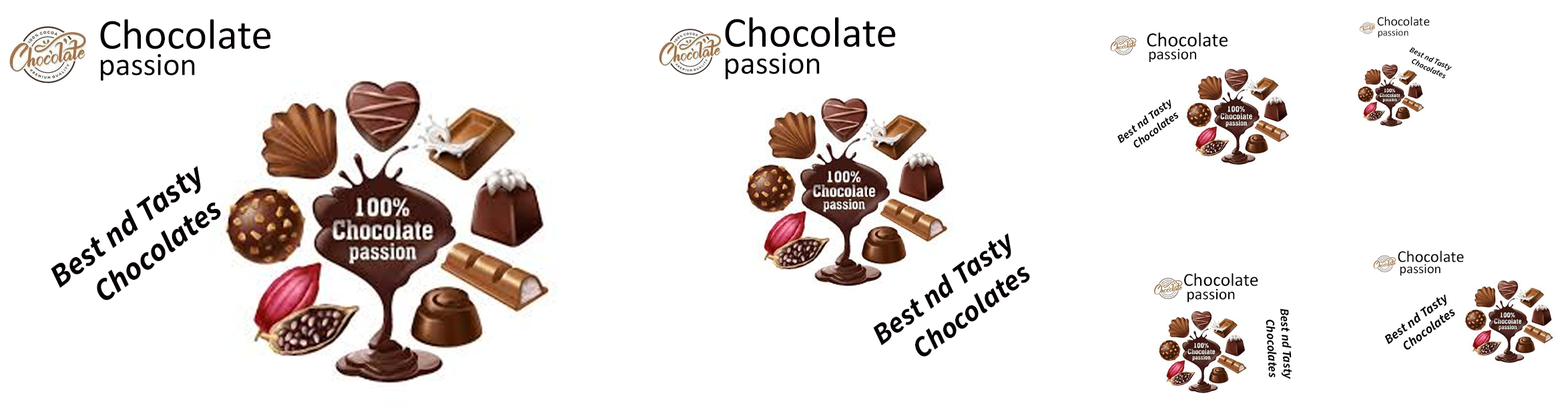
<style>
.page{position:relative;width:1568px;height:420px;background:#ffffff}
.page>*{position:absolute;margin:0}
.t1{font:43px "Calibri";color:#070101}
.t2{font:13px "Calibri";color:#070101}
.t3{font:10.2px "Calibri";color:#070101}
.t4{font:20.3px "Calibri";color:#070101}
.t5{font:32px "Calibri";color:#070101}
.t6{font:16px "Calibri";color:#070101}
.t7{font:7.9px "SourceSansItalic-BoldItalic";color:#070101}
.t8{font:11.5px "SourceSansItalic-BoldItalic";color:#070101}
.t9{font:32px "SourceSansItalic-BoldItalic";color:#070101}
.t10{font:29.5px "SourceSansItalic-BoldItalic";color:#070101}
.t11{font:16.6px "Calibri";color:#070101}
.t12{font:13.7px "Calibri";color:#070101}
.t13{font:18.6px "Calibri";color:#070101}
.t14{font:13.2px "SourceSansItalic-BoldItalic";color:#070101}
.t15{font:12.4px "SourceSansItalic-BoldItalic";color:#070101}
</style>
<div class="page">
<p class="t1" style="left:725px;top:17px;width:171px;height:30px">Chocolate</p>
<p class="t2" style="left:1377px;top:17px;width:53px;height:9px">Chocolate</p>
<p class="t1" style="left:100px;top:19px;width:171px;height:30px">Chocolate</p>
<p class="t3" style="left:1378px;top:29px;width:30px;height:9px">passion</p>
<p class="t4" style="left:1147px;top:32px;width:81px;height:15px">Chocolate</p>
<p class="t5" style="left:726px;top:53px;width:94px;height:26px">passion</p>
<p class="t6" style="left:1149px;top:49px;width:47px;height:13px">passion</p>
<p class="t7" style="left:1409px;top:47px;width:43px;height:32px;rotate:25deg">Best nd Tasty<br>    Chocolates</p>
<p class="t5" style="left:101px;top:54px;width:94px;height:27px">passion</p>
<p class="t8" style="left:1117px;top:99px;width:62px;height:49px;rotate:-37deg">Best nd Tasty<br>    Chocolates</p>
<p class="t9" style="left:51px;top:166px;width:170px;height:134px;rotate:-37deg">Best nd Tasty<br>    Chocolates</p>
<p class="t10" style="left:873px;top:233px;width:157px;height:123px;rotate:-37deg">Best nd Tasty<br>    Chocolates</p>
<p class="t11" style="left:1398px;top:250px;width:66px;height:12px">Chocolate</p>
<p class="t12" style="left:1400px;top:264px;width:41px;height:12px">passion</p>
<p class="t13" style="left:1184px;top:273px;width:74px;height:13px">Chocolate</p>
<p class="t6" style="left:1188px;top:288px;width:47px;height:14px">passion</p>
<p class="t14" style="left:1384px;top:294px;width:71px;height:56px;rotate:-37deg">Best nd Tasty<br>    Chocolates</p>
<p class="t15" style="left:1266px;top:308px;width:26px;height:71px;rotate:87deg">Best nd Tasty<br>    Chocolates</p>
</div>
